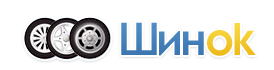
<style>
.page{position:relative;width:274px;height:70px;background:#ffffff}
.page>*{position:absolute;margin:0}
.t1{font:45px "TrebuchetMS-Bold";letter-spacing:-0.075em;color:#4075ab}
.t2{font:45px "AvantGardeITCbyBT-Demi";letter-spacing:-0.025em;color:#f3c72d}
</style>
<div class="page">
<p class="t1" style="left:121px;top:22px;width:83px;height:34px">Шин</p>
<p class="t2" style="left:207px;top:23px;width:49px;height:33px">ok</p>
</div>
